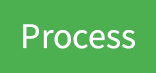
<style>
.page{position:relative;width:156px;height:73px;background:#4caf50}
.page>*{position:absolute;margin:0}
.t1{font:36px "SourceSansRoman-Regular";color:#ffffff}
</style>
<div class="page">
<p class="t1" style="left:23px;top:24px;width:112px;height:25px">Process</p>
</div>
